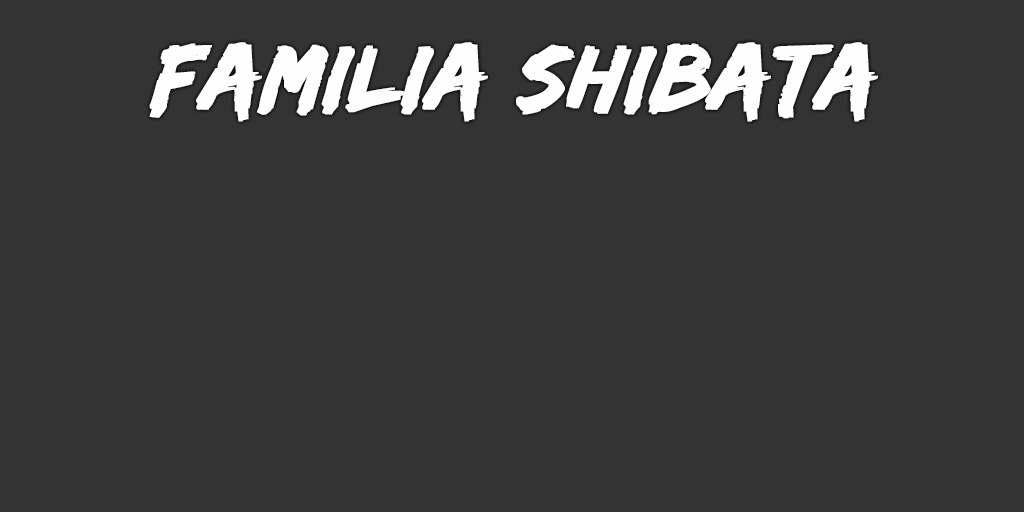
<style>
.page{position:relative;width:1024px;height:512px;background:#333333}
.page>*{position:absolute;margin:0}
.t1{font:94px "EdoSZ";color:#fefefe;font-weight:bold;font-style:italic;scale:1.04 1}
</style>
<div class="page">
<p class="t1" style="left:149px;top:42px;width:729px;height:80px">familia shibata</p>
</div>
